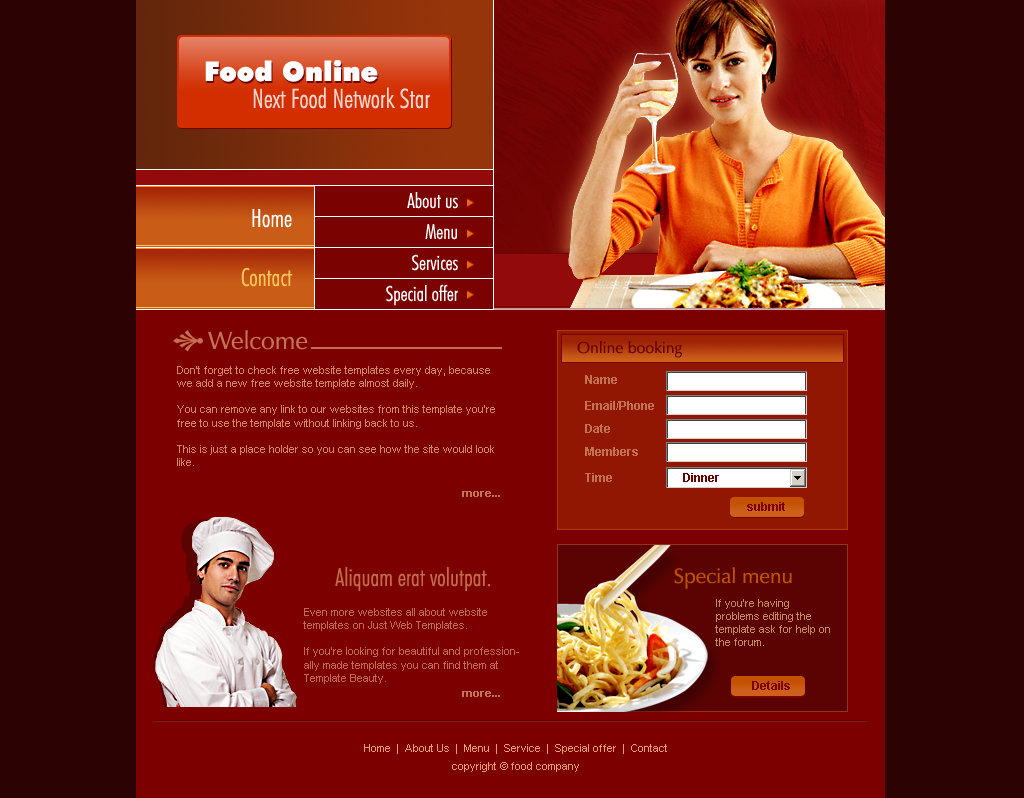
<style>
.page{position:relative;width:1024px;height:798px;background:#7c0000}
.page>*{position:absolute;margin:0}
.t1{font:27px "FuturaBT-ExtraBlack";color:#ffffff}
.t2{font:27px "FuturaBT-LightCondensed";color:#f6d5cc}
.t3{font:21px "FuturaBT-LightCondensed";color:#ffffff}
.t4{font:25px "FuturaBT-LightCondensed";color:#ffffff}
.t5{font:25px "FuturaBT-LightCondensed";color:#ffc559}
.t6{font:25px "ZapfHumanist601BT-Roman";color:#c47552}
.t7{font:16px "ZapfHumanist601BT-Roman";color:#660100}
.t8{font:11px "ArialMT";color:#d08960}
.t9{font:12px "Arial-BoldMT";color:#c4734f}
.t10{font:12px "Arial-BoldMT";color:#660100}
.t11{font:11px "Arial-BoldMT";color:#c47552}
.t12{font:12px "Arial-BoldMT";color:#7c0000}
.t13{font:25px "FuturaBT-LightCondensed";color:#bf6d4d}
.t14{font:21px "ZapfHumanist601BT-Roman";color:#bd5401}
.t15{font:11px "ArialMT";color:#c68a61}
.t16{font:11px "ArialMT";color:#bf6d4d}
.t17{font:11px "ArialMT";color:#e49e6f}
</style>
<div class="page">
<p class="t1" style="left:205px;top:60px;width:173px;height:22px">Food Online</p>
<p class="t1" style="left:206px;top:62px;width:173px;height:22px">Food Online</p>
<p class="t2" style="left:253px;top:87px;width:177px;height:22px">Next Food Network Star</p>
<p class="t3" style="left:407px;top:192px;width:51px;height:17px">About us</p>
<p class="t4" style="left:252px;top:209px;width:40px;height:19px">Home</p>
<p class="t3" style="left:425px;top:224px;width:32px;height:16px">Menu</p>
<p class="t3" style="left:412px;top:254px;width:46px;height:17px">Services</p>
<p class="t5" style="left:241px;top:268px;width:52px;height:19px">Contact</p>
<p class="t3" style="left:386px;top:284px;width:72px;height:22px">Special offer</p>
<p class="t6" style="left:208px;top:330px;width:100px;height:20px">Welcome</p>
<p class="t7" style="left:577px;top:341px;width:105px;height:17px">Online booking</p>
<p class="t8" style="left:177px;top:366px;width:318px;height:100px">Don't forget to check free website templates every day, because we add a new free website template almost daily.<br><br>You can remove any link to our websites from this template you're free to use the template without linking back to us.<br><br>This is just a place holder so you can see how the site would look like.</p>
<p class="t9" style="left:585px;top:375px;width:32px;height:9px">Name</p>
<p class="t9" style="left:585px;top:401px;width:69px;height:9px">Email/Phone</p>
<p class="t9" style="left:585px;top:424px;width:25px;height:9px">Date</p>
<p class="t9" style="left:585px;top:447px;width:53px;height:9px">Members</p>
<p class="t9" style="left:585px;top:473px;width:27px;height:9px">Time</p>
<p class="t10" style="left:683px;top:473px;width:36px;height:9px">Dinner</p>
<p class="t11" style="left:462px;top:491px;width:38px;height:6px">more...</p>
<p class="t12" style="left:747px;top:502px;width:38px;height:9px">submit</p>
<p class="t13" style="left:335px;top:567px;width:156px;height:24px">Aliquam erat volutpat.</p>
<p class="t14" style="left:674px;top:567px;width:118px;height:22px">Special menu</p>
<p class="t15" style="left:715px;top:599px;width:115px;height:47px">If you're having problems editing the template ask for help on the forum.</p>
<p class="t16" style="left:303px;top:608px;width:216px;height:76px">Even more websites all about website templates on Just Web Templates.<br><br>If you're looking for beautiful and professionally made templates you can find them at Template Beauty.</p>
<p class="t12" style="left:752px;top:681px;width:38px;height:9px">Details</p>
<p class="t11" style="left:462px;top:691px;width:38px;height:6px">more...</p>
<p class="t17" style="left:364px;top:744px;width:303px;height:10px">Home  |  About Us  |  Menu  |  Service  |  Special offer  |  Contact</p>
<p class="t17" style="left:452px;top:762px;width:127px;height:10px">copyright © food company</p>
</div>
